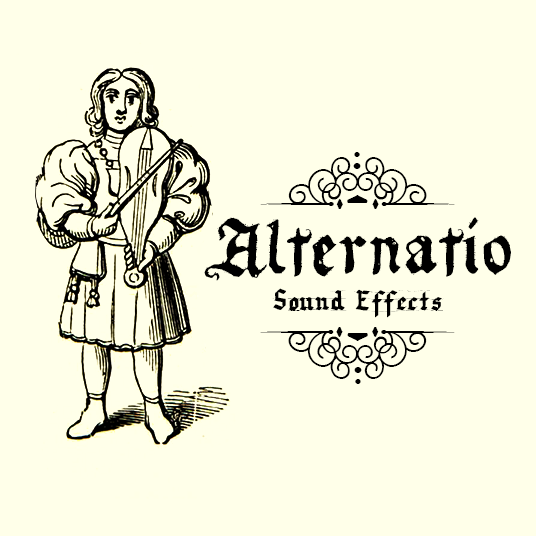
<style>
.page{position:relative;width:536px;height:536px;background:#ffffe9}
.page>*{position:absolute;margin:0}
.t1{font:75px "BergamotOrnaments";letter-spacing:0.025em;color:#000000}
.t2{font:75px "RequiemforA";letter-spacing:0.025em;color:#000000}
.t3{font:33.3px "VeryChristmess";letter-spacing:0.01em;color:#000000}
</style>
<div class="page">
<p class="t1" style="left:260px;top:152px;width:195px;height:57px;rotate:180deg">n</p>
<p class="t2" style="left:204px;top:217px;width:307px;height:64px">Alternatio</p>
<p class="t3" style="left:272px;top:288px;width:172px;height:30px">Sound Effects</p>
<p class="t1" style="left:260px;top:327px;width:195px;height:57px">n</p>
</div>
